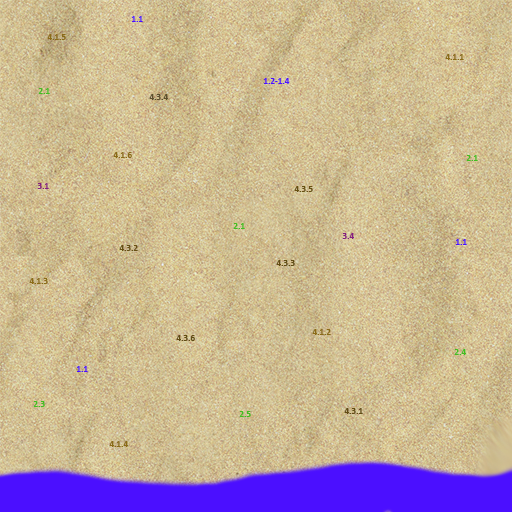
<style>
.page{position:relative;width:512px;height:512px}
.page>*{position:absolute;margin:0}
.t1{font:9px "Calibri-Bold";color:#4b0fff}
.t2{font:9px "Calibri-Bold";color:#8a6b16}
.t3{font:9px "Calibri-Bold";color:#41be20}
.t4{font:9px "Calibri-Bold";color:#5c4f2d}
.t5{font:9px "Calibri-Bold";color:#861d80}
.t6{font:9px "Calibri-Bold";color:#685112}
.t7{font:9px "Calibri-Bold";color:#675013}
.t8{font:9px "Calibri-Bold";color:#614c13}
</style>
<div class="page">
<p class="t1" style="left:132px;top:16px;width:11px;height:6px">1.1</p>
<p class="t2" style="left:47px;top:34px;width:19px;height:6px">4.1.5</p>
<p class="t2" style="left:445px;top:54px;width:19px;height:6px">4.1.1</p>
<p class="t1" style="left:264px;top:78px;width:26px;height:6px">1.2-1.4</p>
<p class="t3" style="left:38px;top:88px;width:12px;height:6px">2.1</p>
<p class="t4" style="left:149px;top:94px;width:19px;height:6px">4.3.4</p>
<p class="t2" style="left:113px;top:152px;width:19px;height:6px">4.1.6</p>
<p class="t3" style="left:466px;top:155px;width:12px;height:6px">2.1</p>
<p class="t5" style="left:37px;top:183px;width:12px;height:6px">3.1</p>
<p class="t6" style="left:294px;top:186px;width:19px;height:6px">4.3.5</p>
<p class="t3" style="left:233px;top:223px;width:12px;height:6px">2.1</p>
<p class="t5" style="left:342px;top:233px;width:12px;height:6px">3.4</p>
<p class="t7" style="left:119px;top:245px;width:19px;height:6px">4.3.2</p>
<p class="t1" style="left:456px;top:239px;width:11px;height:6px">1.1</p>
<p class="t8" style="left:276px;top:260px;width:19px;height:6px">4.3.3</p>
<p class="t2" style="left:29px;top:278px;width:19px;height:6px">4.1.3</p>
<p class="t2" style="left:312px;top:329px;width:19px;height:6px">4.1.2</p>
<p class="t8" style="left:176px;top:335px;width:19px;height:6px">4.3.6</p>
<p class="t3" style="left:454px;top:349px;width:12px;height:6px">2.4</p>
<p class="t1" style="left:77px;top:366px;width:11px;height:6px">1.1</p>
<p class="t3" style="left:33px;top:401px;width:12px;height:6px">2.3</p>
<p class="t3" style="left:239px;top:411px;width:12px;height:6px">2.5</p>
<p class="t8" style="left:344px;top:408px;width:19px;height:6px">4.3.1</p>
<p class="t2" style="left:109px;top:441px;width:19px;height:6px">4.1.4</p>
</div>
